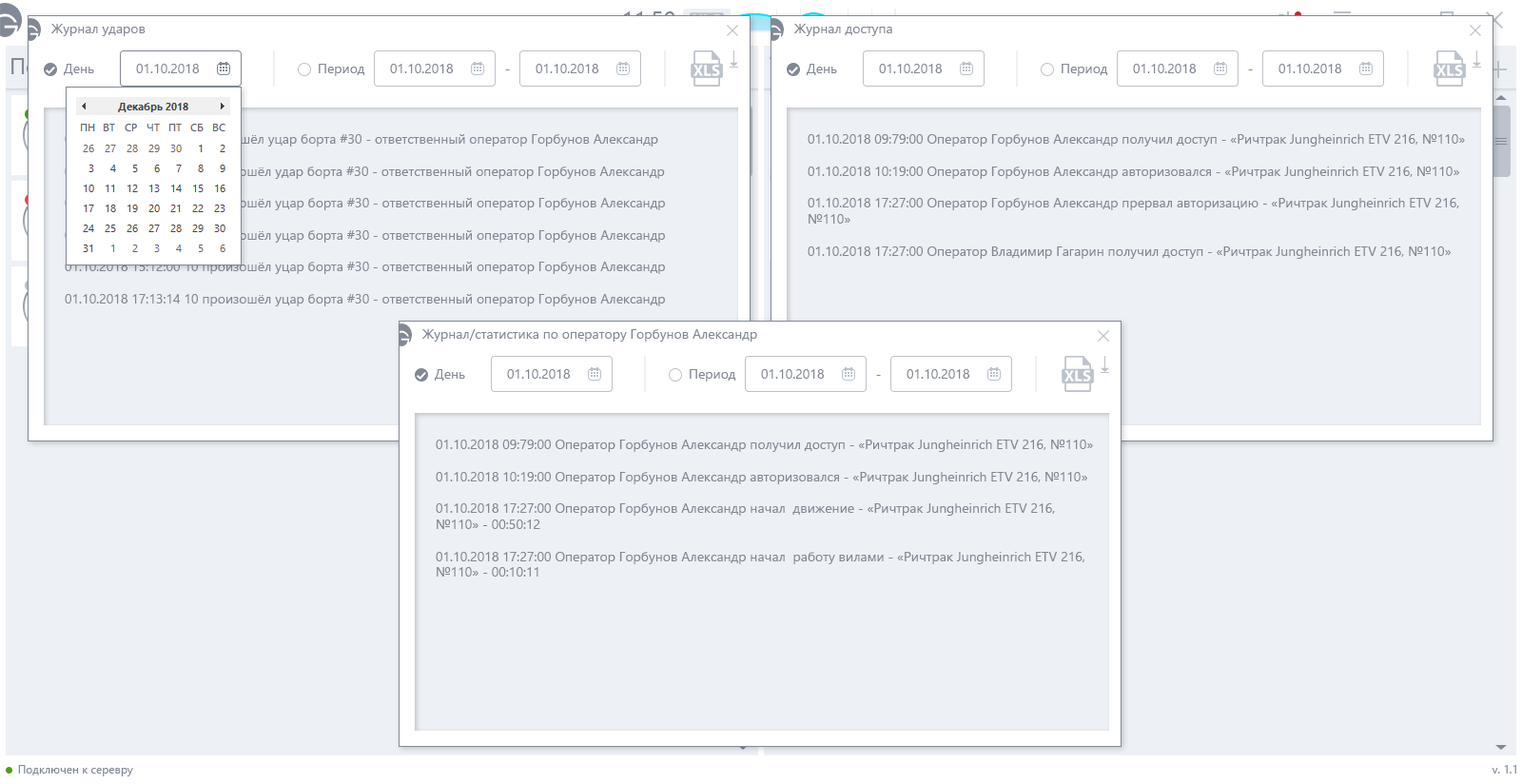
<style>
.page{position:relative;width:1522px;height:784px;background:#edf1f6}
.page>*{position:absolute;margin:0}
.t1{font:13.3px "SegoeUI";color:#828894}
</style>
<div class="page">
<p class="t1" style="left:50px;top:24px;width:96px;height:12px">Журнал ударов</p>
<p class="t1" style="left:793px;top:24px;width:99px;height:12px">Журнал доступа</p>
<p class="t1" style="left:64px;top:64px;width:30px;height:11px">День</p>
<p class="t1" style="left:136px;top:64px;width:64px;height:9px">01.10.2018</p>
<p class="t1" style="left:319px;top:64px;width:46px;height:12px">Период</p>
<p class="t1" style="left:390px;top:64px;width:64px;height:9px">01.10.2018</p>
<p class="t1" style="left:535px;top:64px;width:64px;height:9px">01.10.2018</p>
<p class="t1" style="left:806px;top:64px;width:31px;height:11px">День</p>
<p class="t1" style="left:879px;top:64px;width:63px;height:9px">01.10.2018</p>
<p class="t1" style="left:1061px;top:64px;width:47px;height:12px">Период</p>
<p class="t1" style="left:1133px;top:64px;width:63px;height:9px">01.10.2018</p>
<p class="t1" style="left:1278px;top:64px;width:64px;height:9px">01.10.2018</p>
<p class="t1" style="left:505px;top:69px;width:5px;height:1px">-</p>
<p class="t1" style="left:1248px;top:69px;width:5px;height:1px">-</p>
<p class="t1" style="left:65px;top:134px;width:600px;height:172px;text-align:justify">01.10.2018 9:49:00 10 произошёл уцар борта #30 - ответственный оператор Горбунов Александр<br><br>01.10.2018 11:59:00 10 произошёл удар борта #30 - ответственный оператор Горбунов Александр<br><br>01.10.2018 12:54:00 10 произошёл уцар борта #30 - ответственный оператор Горбунов Александр<br><br>01.10.2018 14:42:00 10 произошёл уцар борта #30 - ответственный оператор Горбунов Александр<br><br>01.10.2018 15:12:00 10 произошёл уцар борта #30 - ответственный оператор Горбунов Александр<br><br>01.10.2018 17:13:14 10 произошёл уцар борта #30 - ответственный оператор Горбунов Александр</p>
<p class="t1" style="left:807px;top:134px;width:658px;height:125px;text-align:justify">01.10.2018 09:79:00 Оператор Горбунов Александр получил доступ - «Ричтрак Jungheinrich ETV 216, №110»<br><br>01.10.2018 10:19:00 Оператор Горбунов Александр авторизовался - «Ричтрак Jungheinrich ETV 216, №110»<br><br>01.10.2018 17:27:00 Оператор Горбунов Александр прервал авторизацию - «Ричтрак Jungheinrich ETV 216, <br>№110»<br><br>01.10.2018 17:27:00 Оператор Владимир Гагарин получил доступ - «Ричтрак Jungheinrich ETV 216, №110»</p>
<p class="t1" style="left:421px;top:329px;width:336px;height:12px">Журнал/статистика по оператору Горбунов Александр</p>
<p class="t1" style="left:435px;top:369px;width:30px;height:11px">День</p>
<p class="t1" style="left:507px;top:369px;width:64px;height:10px">01.10.2018</p>
<p class="t1" style="left:689px;top:369px;width:47px;height:12px">Период</p>
<p class="t1" style="left:761px;top:369px;width:64px;height:10px">01.10.2018</p>
<p class="t1" style="left:876px;top:375px;width:5px;height:1px">-</p>
<p class="t1" style="left:906px;top:369px;width:64px;height:10px">01.10.2018</p>
<p class="t1" style="left:436px;top:439px;width:657px;height:137px;text-align:justify">01.10.2018 09:79:00 Оператор Горбунов Александр получил доступ - «Ричтрак Jungheinrich ETV 216, №110»<br><br>01.10.2018 10:19:00 Оператор Горбунов Александр авторизовался - «Ричтрак Jungheinrich ETV 216, №110»<br><br>01.10.2018 17:27:00 Оператор Горбунов Александр начал  движение - «Ричтрак Jungheinrich ETV 216, <br>№110» - 00:50:12<br><br>01.10.2018 17:27:00 Оператор Горбунов Александр начал  работу вилами - «Ричтрак Jungheinrich ETV 216, <br>№110» - 00:10:11</p>
</div>
